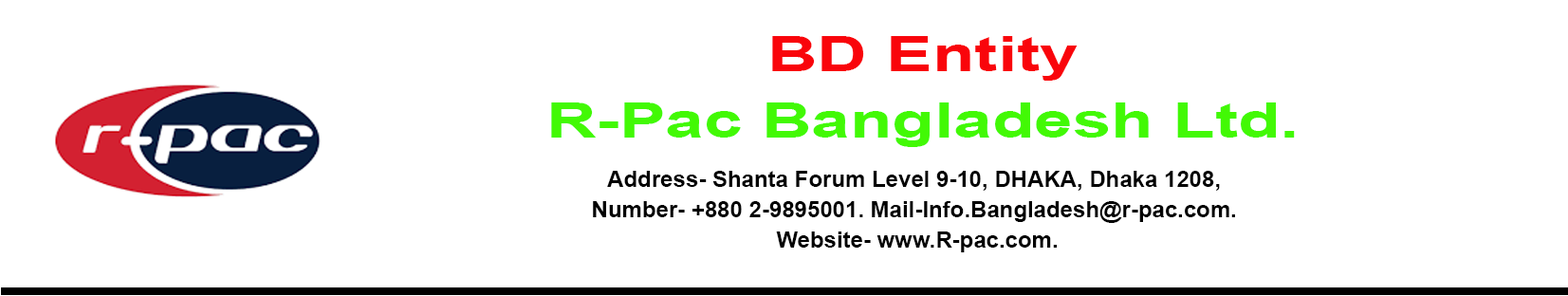
<style>
.page{position:relative;width:1568px;height:296px;background:#ffffff}
.page>*{position:absolute;margin:0}
.t1{font:49.3px/65.7px "Arial-BoldMT";color:#42f905;scale:1.4 1}
.t2{font:49.3px/65.7px "Arial-BoldMT";color:#f9050b;scale:1.4 1}
.t3{font:22.8px/30.4px "Arial-BoldMT";color:#020202}
</style>
<div class="page">
<p class="t1" style="left:551px;top:36px;width:744px;height:111px;text-align:center"><span class="t2">BD Entity<br></span>R-Pac Bangladesh Ltd.</p>
<p class="t3" style="left:593px;top:171px;width:642px;height:81px;text-align:center">Address- Shanta Forum Level 9-10, DHAKA, Dhaka 1208, <br>Number- +880 2-9895001. Mail-Info.Bangladesh@r-pac.com. <br>Website- www.R-pac.com.</p>
</div>
